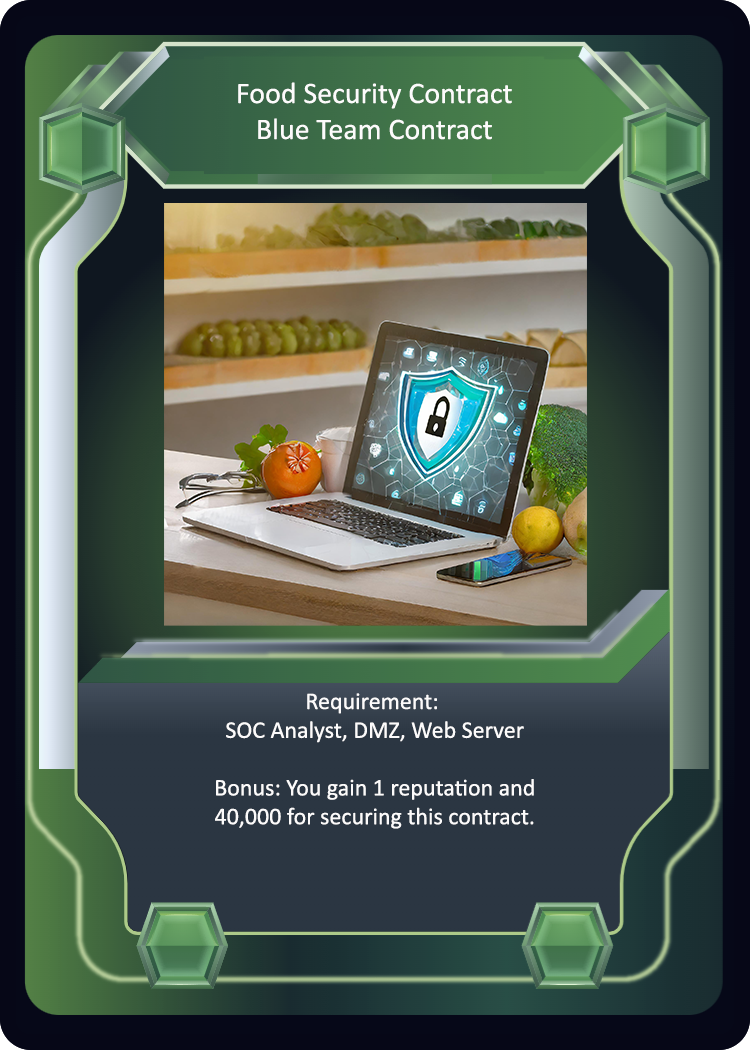
<style>
.page{position:relative;width:750px;height:1050px}
.page>*{position:absolute;margin:0}
.t1{font:30px "Calibri";color:#fcfbfb}
.t2{font:24px "Calibri";color:#fcfbfb}
</style>
<div class="page">
<p class="t1" style="left:238px;top:82px;width:274px;height:58px;text-align:center">Food Security Contract<br>Blue Team Contract</p>
<p class="t2" style="left:215px;top:693px;width:319px;height:136px;text-align:center">Requirement: <br>SOC Analyst, DMZ, Web Server<br><br>Bonus: You gain 1 reputation and<br>40,000 for securing this contract.</p>
</div>
